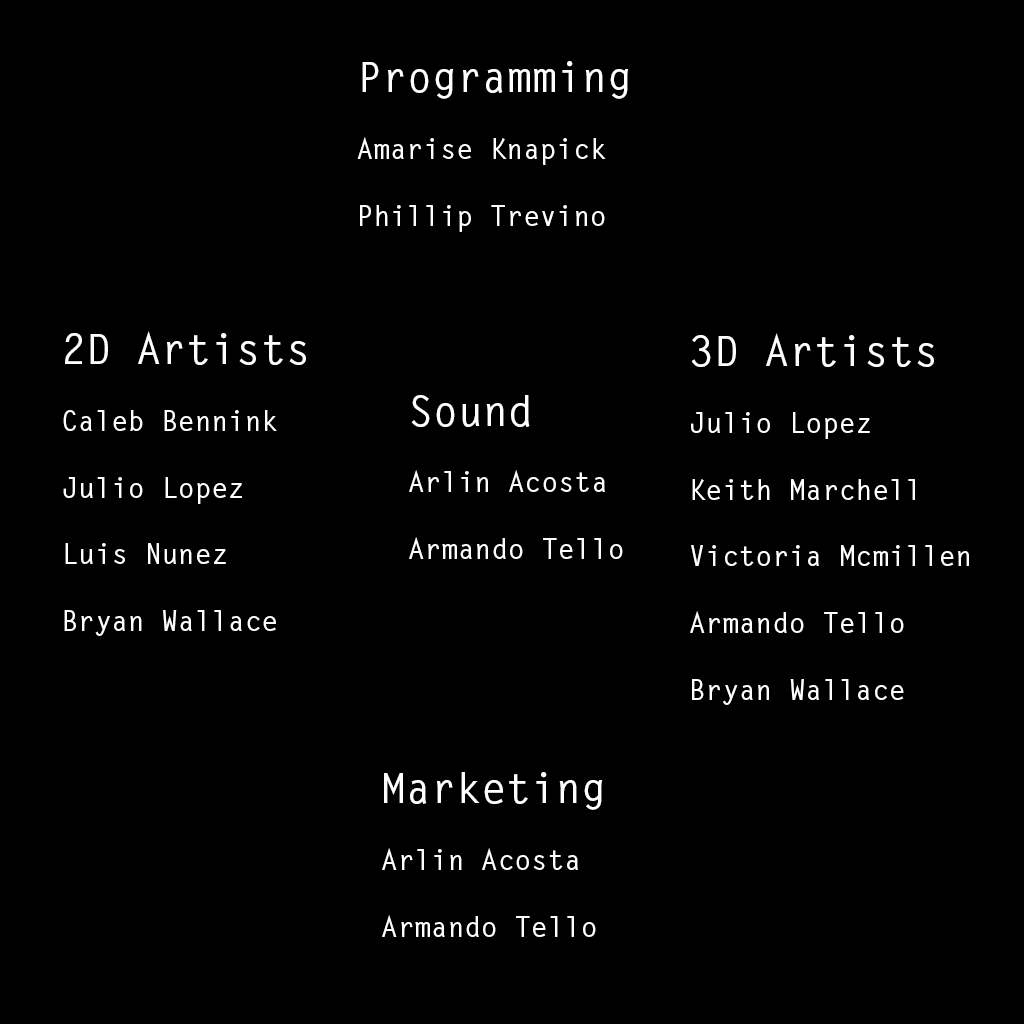
<style>
.page{position:relative;width:1024px;height:1024px;background:#000000}
.page>*{position:absolute;margin:0}
.t1{font:27.8px "LetterGothicStd-Bold";color:#ffffff}
.t2{font:41.7px "LetterGothicStd-Bold";color:#ffffff}
</style>
<div class="page">
<p class="t1" style="left:357px;top:61px;width:272px;height:171px"><span class="t2">Programming<br></span><br>Amarise Knapick<br><br>Phillip Trevino</p>
<p class="t1" style="left:63px;top:331px;width:243px;height:305px"><span class="t2">2D Artists<br></span><br>Caleb Bennink<br><br>Julio Lopez<br><br>Luis Nunez<br><br>Bryan Wallace</p>
<p class="t1" style="left:690px;top:333px;width:279px;height:372px"><span class="t2">3D Artists<br></span><br>Julio Lopez<br><br>Keith Marchell<br><br>Victoria Mcmillen<br><br>Armando Tello<br><br>Bryan Wallace</p>
<p class="t1" style="left:409px;top:395px;width:214px;height:164px"><span class="t2">Sound<br></span><br>Arlin Acosta<br><br>Armando Tello</p>
<p class="t1" style="left:382px;top:772px;width:221px;height:165px"><span class="t2">Marketing<br></span><br>Arlin Acosta<br><br>Armando Tello</p>
</div>
